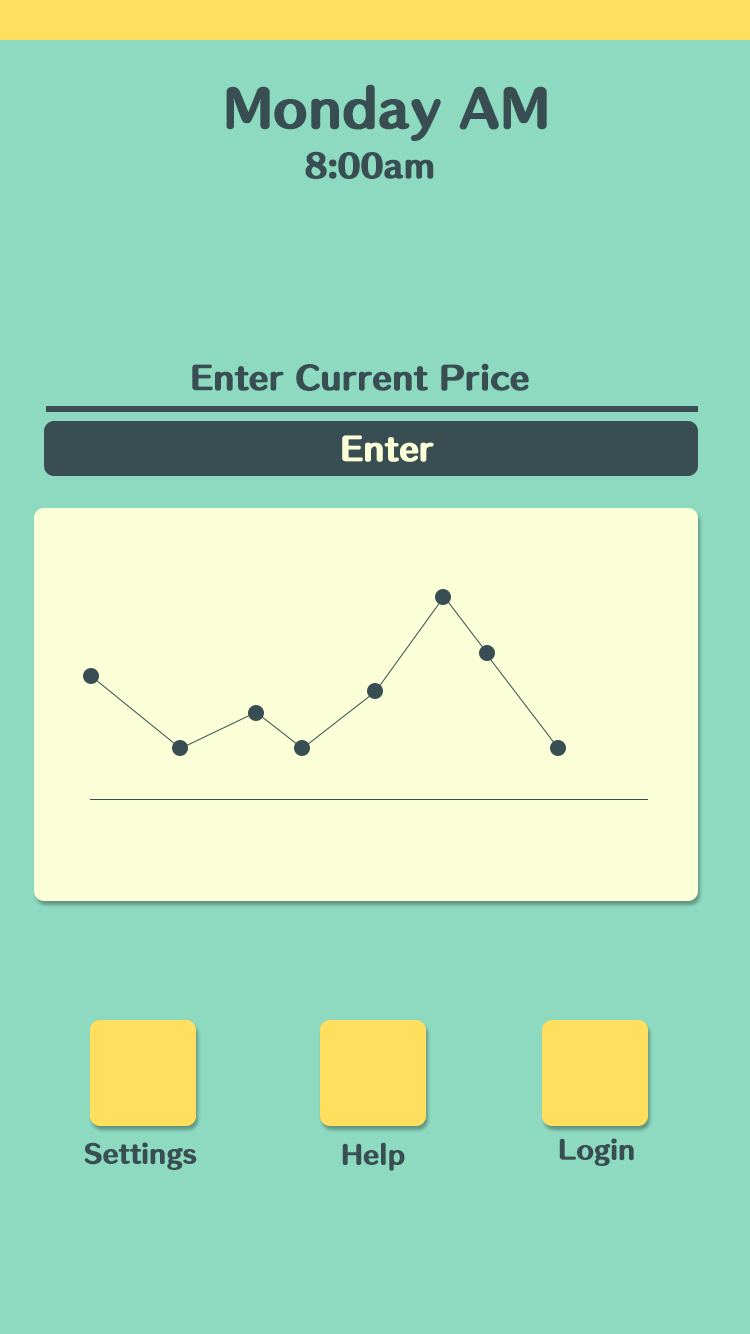
<style>
.page{position:relative;width:750px;height:1334px;background:#8ddac1}
.page>*{position:absolute;margin:0}
.t1{font:48px "nintendoP_Humming-E002pr";color:#384e53;font-weight:bold}
.t2{font:30px "nintendoP_Humming-E002pr";color:#384e53;font-weight:bold}
.t3{font:30px "nintendoP_Humming-E002pr";color:#fbffd8;font-weight:bold}
.t4{font:24px "nintendoP_Humming-E002pr";color:#384e53;font-weight:bold}
</style>
<div class="page">
<p class="t1" style="left:226px;top:84px;width:321px;height:57px">Monday AM</p>
<p class="t2" style="left:305px;top:151px;width:129px;height:28px">8:00am</p>
<p class="t2" style="left:192px;top:363px;width:337px;height:28px">Enter Current Price</p>
<p class="t3" style="left:342px;top:435px;width:92px;height:27px">Enter</p>
<p class="t4" style="left:84px;top:1142px;width:113px;height:28px">Settings</p>
<p class="t4" style="left:342px;top:1142px;width:63px;height:29px">Help</p>
<p class="t4" style="left:559px;top:1138px;width:75px;height:28px">Login</p>
</div>
